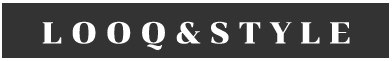
<style>
.page{position:relative;width:392px;height:61px;background:#333333}
.page>*{position:absolute;margin:0}
.t1{font:30px "Chonburi-Regular";color:#ffffff}
</style>
<div class="page">
<p class="t1" style="left:42px;top:21px;width:308px;height:30px">L O O Q &amp; S T Y L E</p>
</div>
